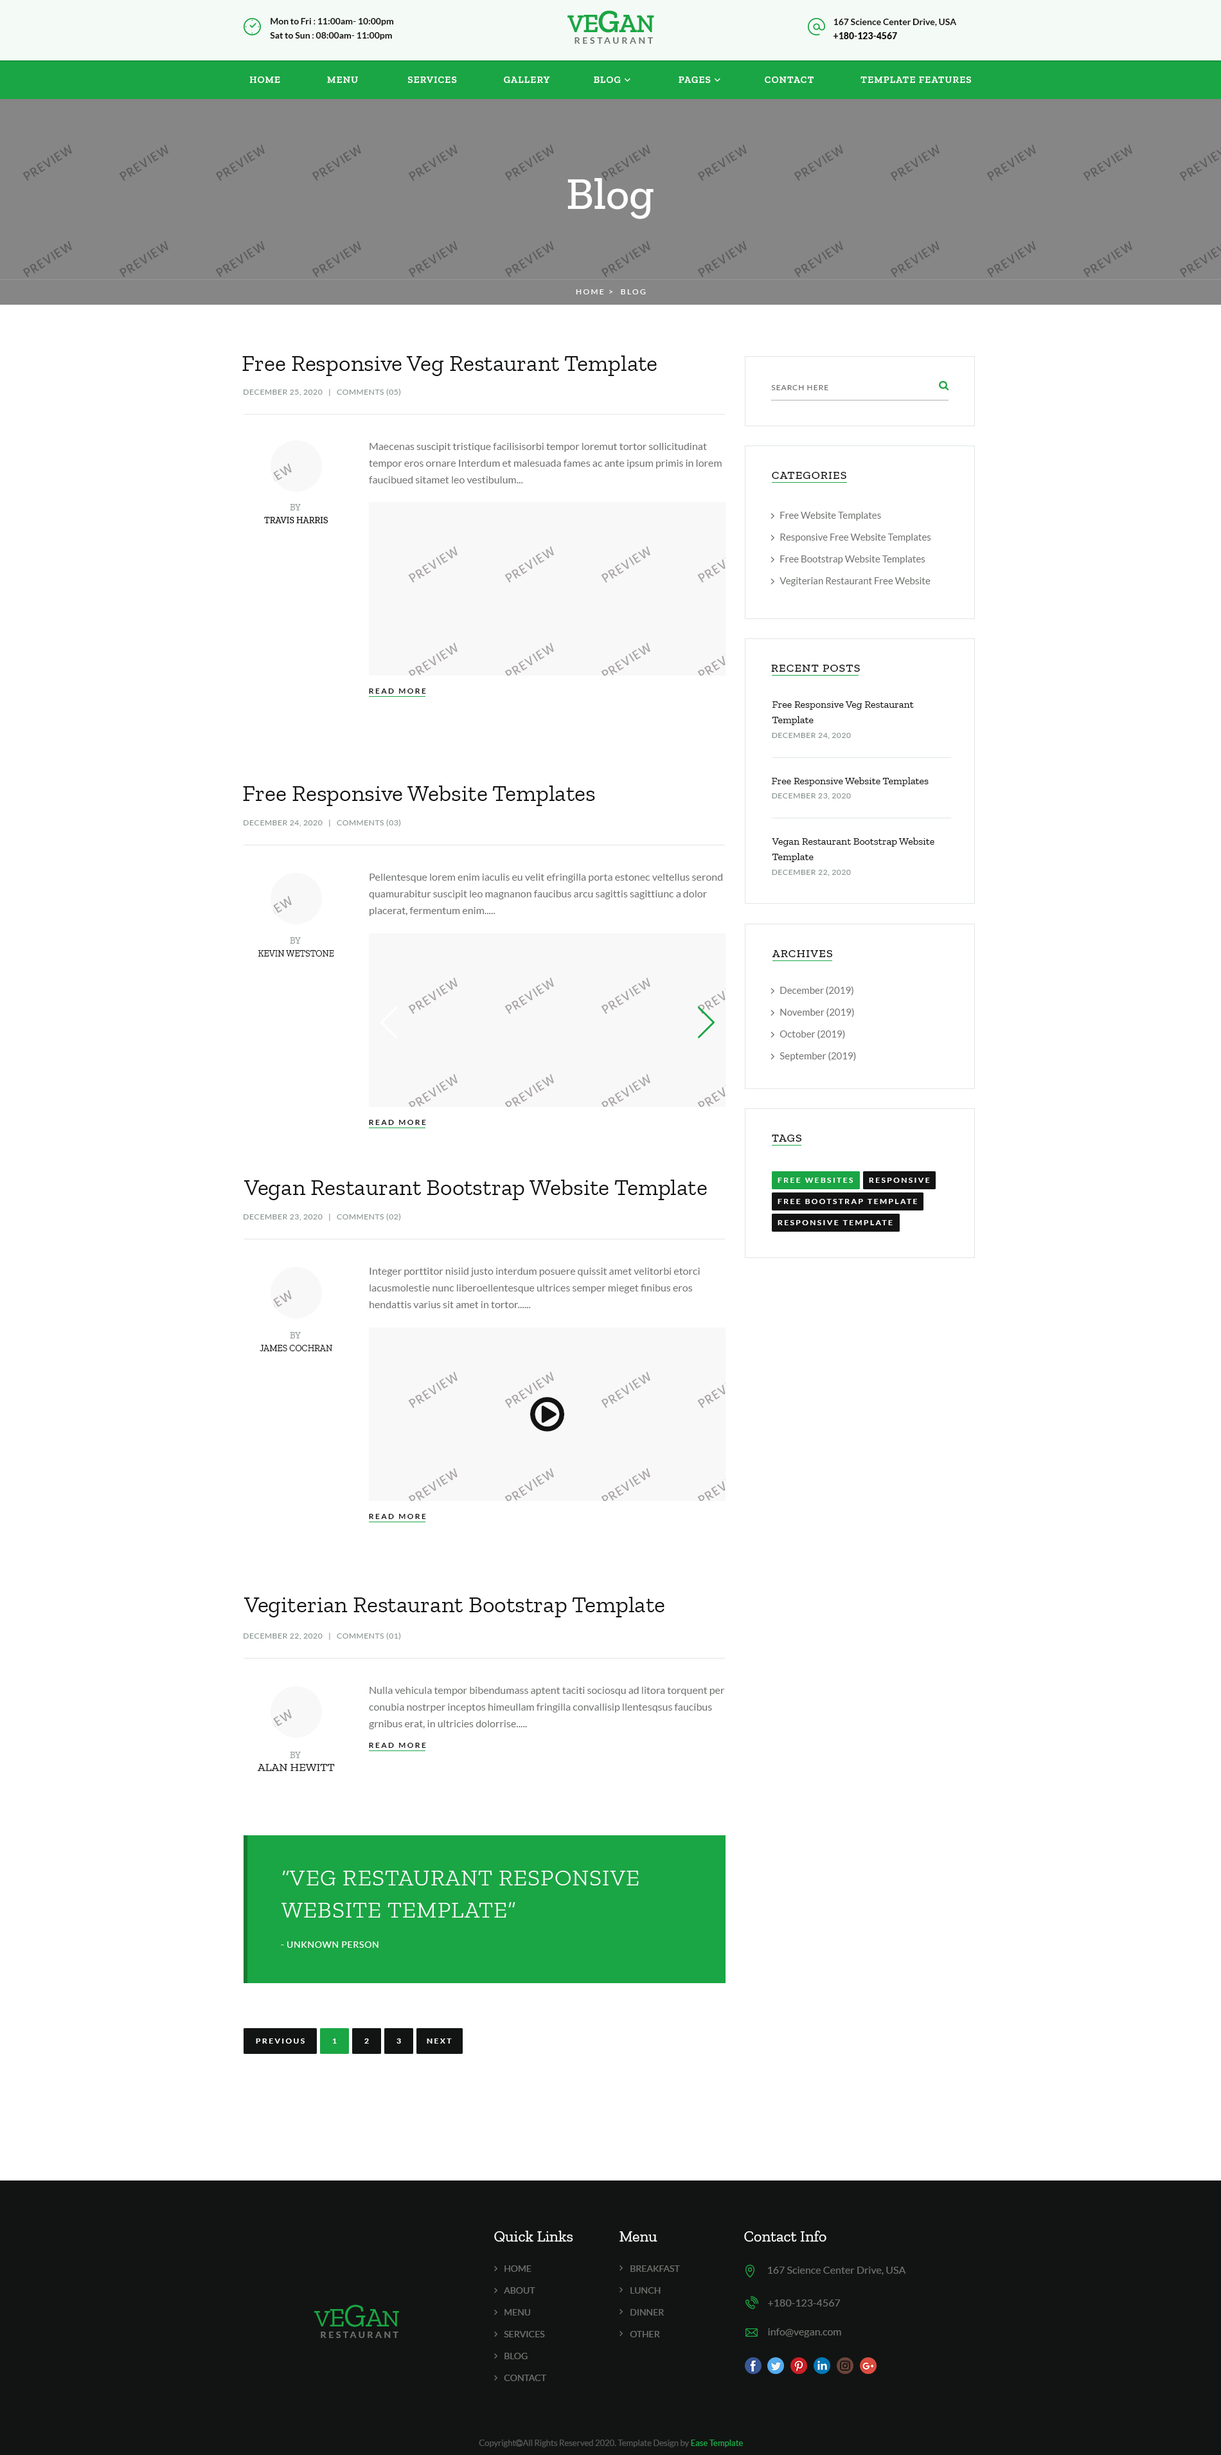
<style>
.page{position:relative;width:1221px;height:2455px;background:#ffffff}
.page>*{position:absolute;margin:0}
.t1{font:24.4px "ZillaSlab-SemiBold";letter-spacing:-0.03em;color:#1aa644;text-transform:uppercase}
.t2{font:27px "ZillaSlab-SemiBold";letter-spacing:-0.03em;color:#1aa644;text-transform:uppercase}
.t3{font:32.1px "ZillaSlab-SemiBold";letter-spacing:-0.03em;color:#1aa644;text-transform:uppercase}
.t4{font:9px/14.1px "Lato-Bold";color:#121312}
.t5{font:9px/14.1px "Lato-Regular";color:#121312}
.t6{font:9px/14.1px "Lato-Black";color:#121312}
.t7{font:9px "Lato-Bold";letter-spacing:0.26em;color:#6e726e;text-transform:uppercase}
.t8{font:45px "ZillaSlab-Medium";color:#ffffff}
.t9{font:7.7px "Lato-Regular";letter-spacing:0.2em;color:#ffffff;text-transform:uppercase}
.t10{font:23.1px "ZillaSlab-Regular";color:#121413}
.t11{font:7.7px "Lato-Regular";letter-spacing:0.05em;color:#8b9691;text-transform:uppercase}
.t12{font:7.7px "Lato-Regular";letter-spacing:0.08em;color:#6e726e;text-transform:uppercase}
.t13{font:10.3px/16.7px "Lato-Regular";color:#6e726e}
.t14{font:11.6px "ZillaSlab-Medium";letter-spacing:0.06em;color:#121413;text-transform:uppercase}
.t15{font:9px/12.9px "ZillaSlab-Medium";color:#121413;text-transform:uppercase}
.t16{font:9px/12.9px "ZillaSlab-Regular";color:#929994;text-transform:uppercase}
.t17{font:9.6px/21.9px "Lato-Regular";color:#6e726e}
.t18{font:7.7px "Lato-Bold";letter-spacing:0.2em;color:#121312;text-transform:uppercase}
.t19{font:10.3px/15.4px "ZillaSlab-Regular";color:#121413}
.t20{font:10.3px "ZillaSlab-Regular";color:#121413}
.t21{font:9px/12.9px "ZillaSlab-Regular";color:#121413;text-transform:uppercase}
.t22{font:7.7px "Lato-Bold";letter-spacing:0.2em;color:#fafdfc;text-transform:uppercase}
.t23{font:11.6px/12.9px "ZillaSlab-Regular";color:#121413;text-transform:uppercase}
.t24{font:23.1px/32.1px "ZillaSlab-Light";letter-spacing:0.03em;color:#fafdfc;text-transform:uppercase}
.t25{font:9px "Lato-Regular";letter-spacing:0.05em;color:#fafdfc;text-transform:uppercase}
.t26{font:15.4px "ZillaSlab-Regular";color:#ffffff}
.t27{font:9px/21.9px "Lato-Regular";color:#6e726e;text-transform:uppercase}
.t28{font:10.3px "Lato-Regular";color:#6e726e}
.t29{font:24.4px "ZillaSlab-Regular";letter-spacing:-0.03em;color:#1aa644;text-transform:uppercase}
.t30{font:27px "ZillaSlab-Regular";letter-spacing:-0.03em;color:#1aa644;text-transform:uppercase}
.t31{font:32.1px "ZillaSlab-Regular";letter-spacing:-0.03em;color:#1aa644;text-transform:uppercase}
.t32{font:9px "Lato-Bold";letter-spacing:0.25em;color:#6e726e;text-transform:uppercase}
</style>
<div class="page">
<p class="t1" style="left:568px;top:10px;width:86px;height:23px">V<span class="t2">e</span><span class="t3">G</span><span class="t2">a</span>n</p>
<p class="t4" style="left:270px;top:18px;width:124px;height:22px">Mon to Fri<span class="t5"> : </span>11:00am- 10:00pm<br>Sat to Sun<span class="t5"> : </span>08:00am- 11:00pm</p>
<p class="t4" style="left:834px;top:19px;width:123px;height:20px">167 Science Center Drive, USA<br><span class="t6">+180-123-4567</span></p>
<p class="t7" style="left:575px;top:37px;width:78px;height:7px">Restaurant</p>
<p class="t8" style="left:568px;top:178px;width:86px;height:41px">Blog</p>
<p class="t9" style="left:576px;top:289px;width:70px;height:5px">Home &gt;  Blog</p>
<p class="t10" style="left:242px;top:356px;width:415px;height:20px">Free Responsive Veg Restaurant Template</p>
<p class="t11" style="left:244px;top:388px;width:157px;height:8px">December 25, 2020   |   Comments (05)</p>
<p class="t12" style="left:771px;top:385px;width:58px;height:5px">Search Here</p>
<p class="t13" style="left:369px;top:443px;width:353px;height:40px">Maecenas suscipit tristique facilisisorbi tempor loremut tortor sollicitudinat tempor eros ornare Interdum et malesuada fames ac ante ipsum primis in lorem faucibued sitamet leo vestibulum...</p>
<p class="t14" style="left:772px;top:472px;width:75px;height:7px">Categories</p>
<p class="t15" style="left:264px;top:504px;width:64px;height:19px;text-align:center"><span class="t16">by <br></span>Travis Harris</p>
<p class="t17" style="left:780px;top:512px;width:152px;height:74px">Free Website Templates<br>Responsive Free Website Templates<br>Free Bootstrap Website Templates<br>Vegiterian Restaurant Free Website</p>
<p class="t14" style="left:771px;top:665px;width:89px;height:7px">Recent Posts</p>
<p class="t18" style="left:369px;top:688px;width:57px;height:6px">Read More</p>
<p class="t19" style="left:772px;top:701px;width:142px;height:24px">Free Responsive Veg Restaurant <br>Template</p>
<p class="t11" style="left:772px;top:733px;width:79px;height:6px">December 24, 2020</p>
<p class="t10" style="left:243px;top:786px;width:352px;height:20px">Free Responsive Website Templates</p>
<p class="t20" style="left:772px;top:777px;width:157px;height:9px">Free Responsive Website Templates</p>
<p class="t11" style="left:772px;top:793px;width:79px;height:7px">December 23, 2020</p>
<p class="t11" style="left:244px;top:819px;width:157px;height:8px">December 24, 2020   |   Comments (03)</p>
<p class="t19" style="left:772px;top:838px;width:163px;height:24px">Vegan Restaurant Bootstrap Website <br>Template</p>
<p class="t11" style="left:772px;top:870px;width:79px;height:6px">December 22, 2020</p>
<p class="t13" style="left:369px;top:874px;width:354px;height:42px">Pellentesque lorem enim iaculis eu velit efringilla porta estonec veltellus serond quamurabitur suscipit leo magnanon faucibus arcu sagittis sagittiunc a dolor placerat, fermentum enim.....</p>
<p class="t21" style="left:258px;top:937px;width:76px;height:20px;text-align:center"><span class="t16">by <br></span>Kevin Wetstone</p>
<p class="t14" style="left:772px;top:950px;width:61px;height:7px">Archives</p>
<p class="t17" style="left:780px;top:986px;width:76px;height:75px">December (2019)<br>November (2019)<br>October (2019)<br>September (2019)</p>
<p class="t18" style="left:369px;top:1120px;width:57px;height:5px">Read More</p>
<p class="t14" style="left:772px;top:1135px;width:30px;height:7px">Tags</p>
<p class="t10" style="left:244px;top:1180px;width:463px;height:20px">Vegan Restaurant Bootstrap Website Template</p>
<p class="t22" style="left:778px;top:1178px;width:76px;height:5px">Free Websites</p>
<p class="t22" style="left:869px;top:1178px;width:61px;height:5px">Responsive</p>
<p class="t22" style="left:778px;top:1199px;width:139px;height:5px">Free Bootstrap Template</p>
<p class="t11" style="left:244px;top:1213px;width:157px;height:8px">December 23, 2020   |   Comments (02)</p>
<p class="t22" style="left:778px;top:1220px;width:115px;height:5px">Responsive Template</p>
<p class="t13" style="left:370px;top:1268px;width:330px;height:40px">Integer porttitor nisiid justo interdum posuere quissit amet velitorbi etorci lacusmolestie nunc liberoellentesque ultrices semper mieget finibus eros hendattis varius sit amet in tortor......</p>
<p class="t21" style="left:260px;top:1332px;width:72px;height:19px;text-align:center"><span class="t16">by <br></span>James Cochran</p>
<p class="t18" style="left:369px;top:1514px;width:57px;height:5px">Read More</p>
<p class="t10" style="left:244px;top:1597px;width:421px;height:20px">Vegiterian Restaurant Bootstrap Template</p>
<p class="t11" style="left:244px;top:1632px;width:157px;height:8px">December 22, 2020   |   Comments (01)</p>
<p class="t13" style="left:369px;top:1687px;width:356px;height:42px">Nulla vehicula tempor bibendumass aptent taciti sociosqu ad litora torquent per conubia nostrper inceptos himeullam fringilla convallisip llentesqsus faucibus grnibus erat, in ultricies dolorrise.....</p>
<p class="t18" style="left:369px;top:1743px;width:57px;height:5px">Read More</p>
<p class="t23" style="left:257px;top:1752px;width:78px;height:19px;text-align:center"><span class="t16">by <br></span>Alan Hewitt</p>
<p class="t24" style="left:281px;top:1871px;width:358px;height:47px">“Veg Restaurant Responsive<br>Website template”</p>
<p class="t25" style="left:281px;top:1941px;width:98px;height:7px">- unknown Person</p>
<p class="t22" style="left:256px;top:2039px;width:49px;height:5px">Previous</p>
<p class="t22" style="left:333px;top:2039px;width:4px;height:5px">1</p>
<p class="t22" style="left:364px;top:2039px;width:5px;height:5px">2</p>
<p class="t22" style="left:397px;top:2039px;width:4px;height:5px">3</p>
<p class="t22" style="left:427px;top:2039px;width:25px;height:5px">Next</p>
<p class="t26" style="left:494px;top:2231px;width:79px;height:11px">Quick Links</p>
<p class="t26" style="left:620px;top:2231px;width:38px;height:11px">Menu</p>
<p class="t26" style="left:744px;top:2231px;width:83px;height:11px">Contact Info</p>
<p class="t27" style="left:504px;top:2265px;width:42px;height:116px">Home<br>About<br>Menu<br>Services<br>Blog<br>Contact</p>
<p class="t27" style="left:630px;top:2265px;width:50px;height:72px">Breakfast<br>Lunch<br>Dinner<br>Other</p>
<p class="t28" style="left:768px;top:2267px;width:138px;height:8px">167 Science Center Drive, USA</p>
<p class="t29" style="left:314px;top:2305px;width:85px;height:22px">V<span class="t30">e</span><span class="t31">G</span><span class="t30">a</span>n</p>
<p class="t28" style="left:768px;top:2300px;width:73px;height:7px">+180-123-4567</p>
<p class="t32" style="left:321px;top:2332px;width:78px;height:6px">Restaurant</p>
<p class="t28" style="left:768px;top:2328px;width:74px;height:9px">info@vegan.com</p>
</div>
